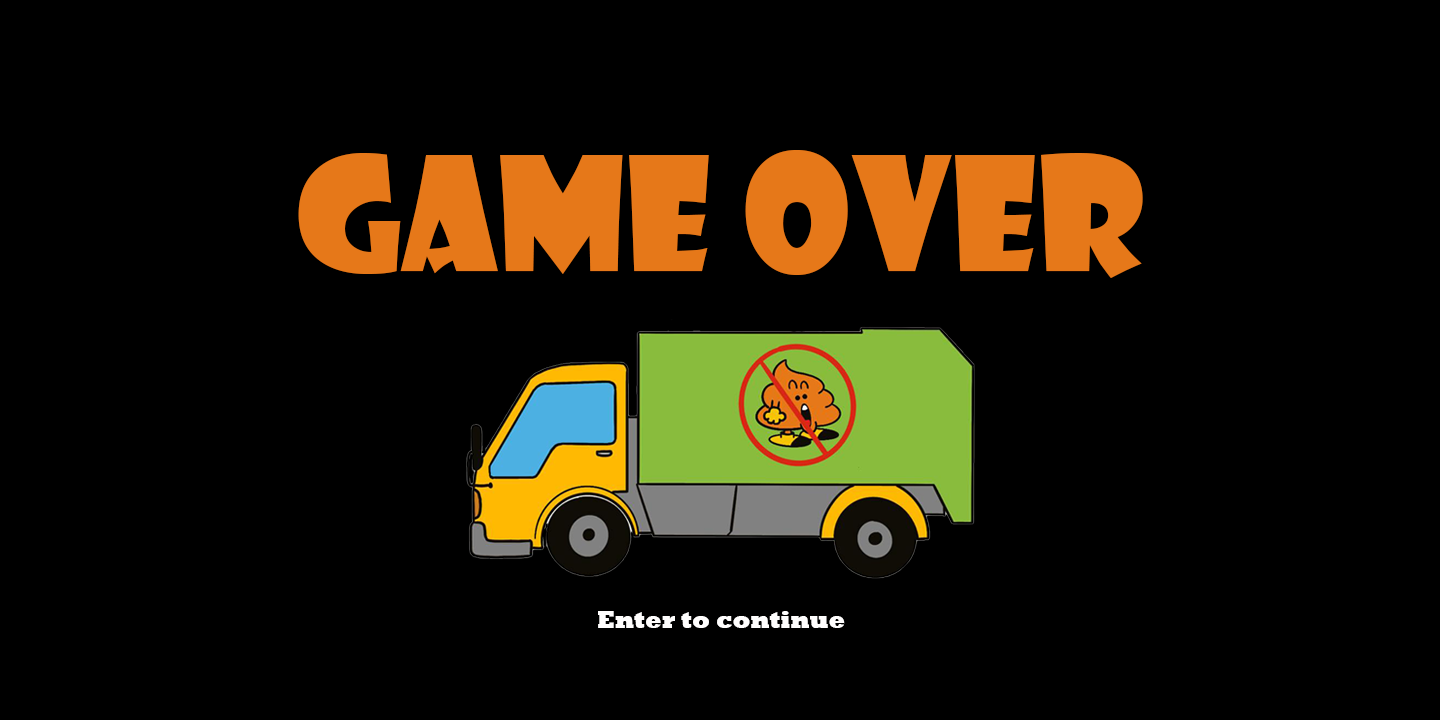
<style>
.page{position:relative;width:1440px;height:720px;background:#000000}
.page>*{position:absolute;margin:0}
.t1{font:155.3px "ShowcardGothic-Reg";color:#e67819}
.t2{font:24px "Rockwell-ExtraBold";color:#fffefe}
</style>
<div class="page">
<p class="t1" style="left:298px;top:150px;width:845px;height:128px">GAME OVER</p>
<p class="t2" style="left:598px;top:611px;width:247px;height:17px">Enter to continue</p>
</div>
